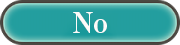
<style>
.page{position:relative;width:180px;height:45px}
.page>*{position:absolute;margin:0}
.t1{font:28px "RyuminPro-ExBold";color:#fdfbf9}
</style>
<div class="page">
<p class="t1" style="left:73px;top:12px;width:34px;height:21px">No</p>
</div>
